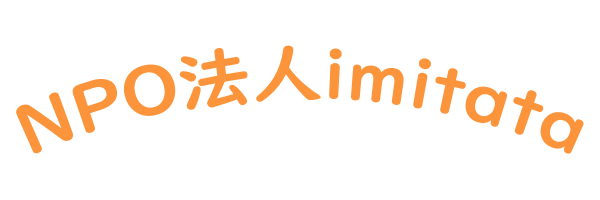
<style>
.page{position:relative;width:600px;height:200px;background:#ffffff}
.page>*{position:absolute;margin:0}
.t1{font:66.7px "UDDigiKyokashoNP-B";color:#fc943c}
</style>
<div class="page">
<p class="t1" style="left:16px;top:45px;width:568px;height:109px">NPO法人imitata</p>
</div>
